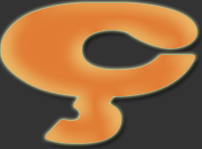
<style>
.page{position:relative;width:202px;height:149px;background:#333333}
.page>*{position:absolute;margin:0}
.t1{font:173.3px "BlackoakStd";color:#e2873d}
.t2{font:242.2px "BlackoakStd";color:#e2873d}
</style>
<div class="page">
<p class="t1" style="left:1px;top:3px;width:196px;height:141px"><span class="t2"> </span>ç</p>
</div>
